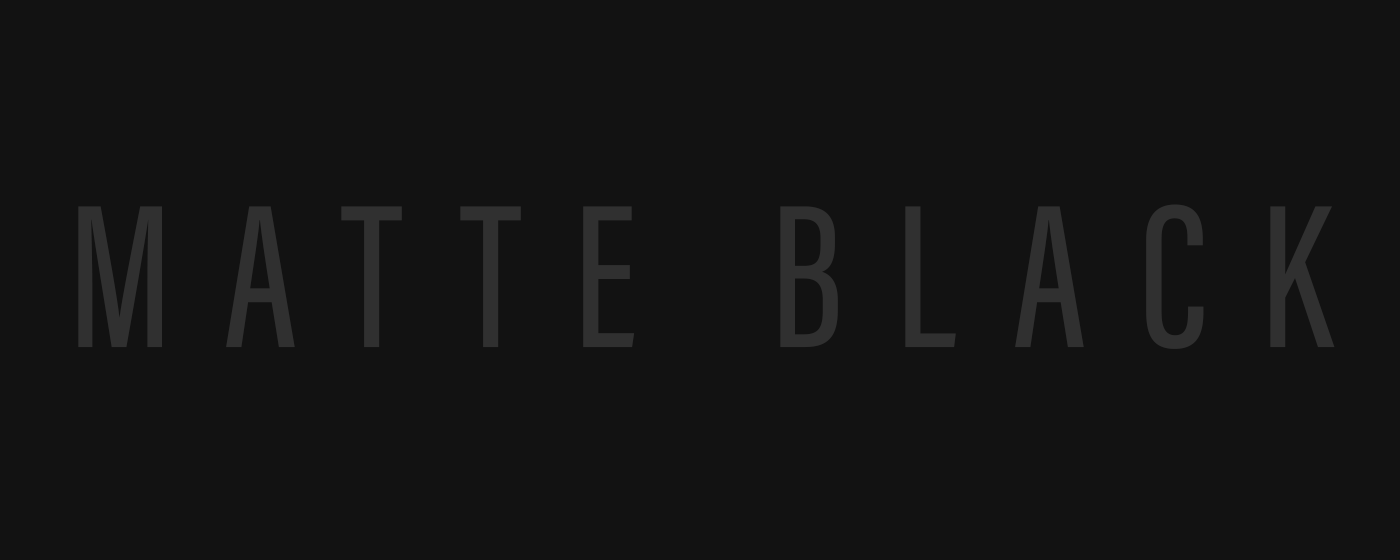
<style>
.page{position:relative;width:1400px;height:560px;background:#121212}
.page>*{position:absolute;margin:0}
.t1{font:210.4px "AcuminConcept-ExtraCondensedMedium";letter-spacing:0.25em;color:#303030}
</style>
<div class="page">
<p class="t1" style="left:78px;top:204px;width:1257px;height:145px">MATTE BLACK</p>
</div>
